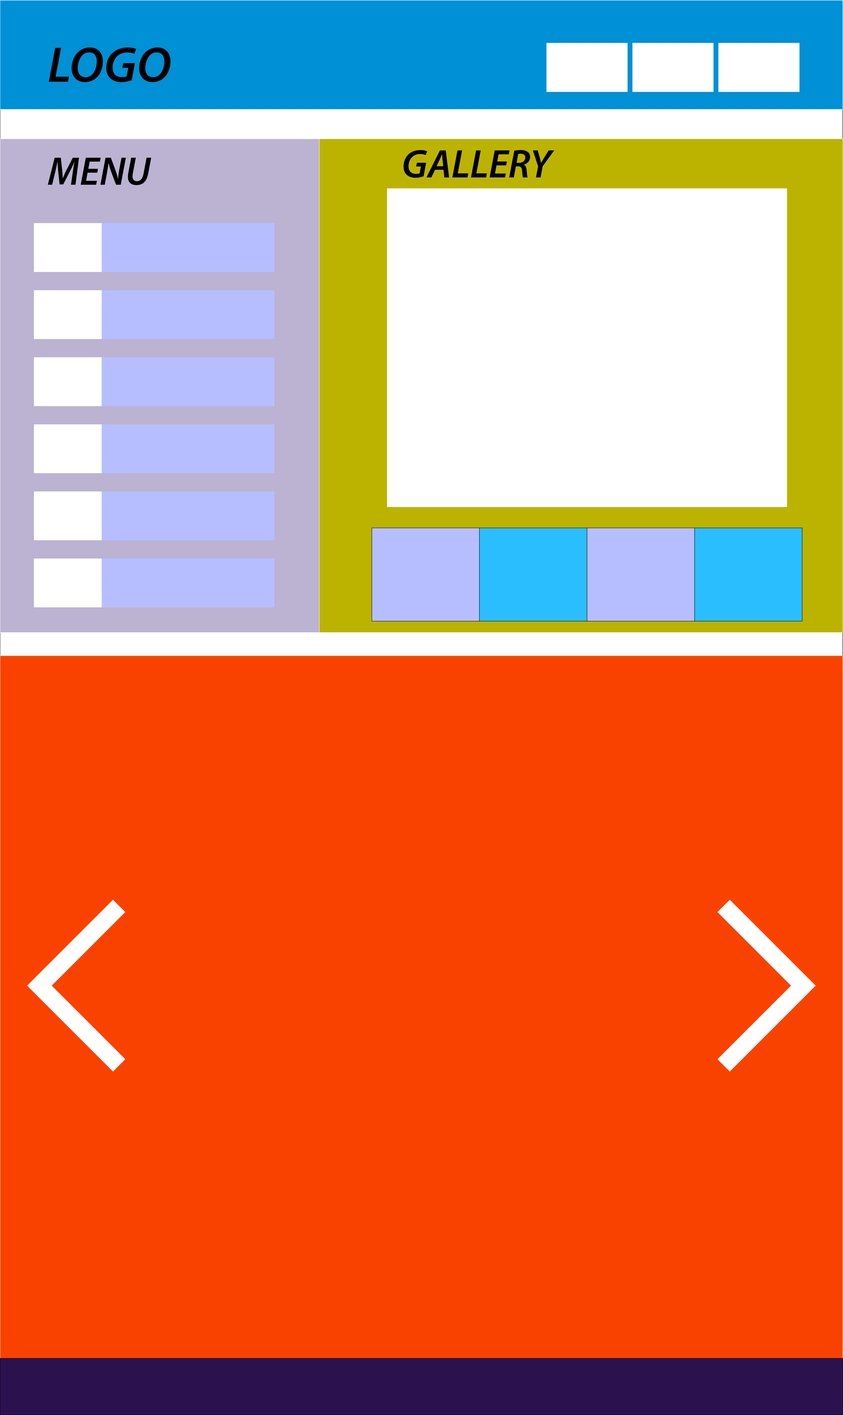
<style>
.page{position:relative;width:843px;height:1415px;background:#fa4200}
.page>*{position:absolute;margin:0}
.t1{font:50.5px "MyriadPro-SemiboldIt";color:#000000;text-transform:uppercase}
.t2{font:39.9px "MyriadPro-SemiboldIt";color:#000000;text-transform:uppercase}
</style>
<div class="page">
<p class="t1" style="left:49px;top:47px;width:121px;height:35px">logo</p>
<p class="t2" style="left:403px;top:150px;width:151px;height:28px">gallery</p>
<p class="t2" style="left:48px;top:158px;width:103px;height:27px">menu</p>
</div>
